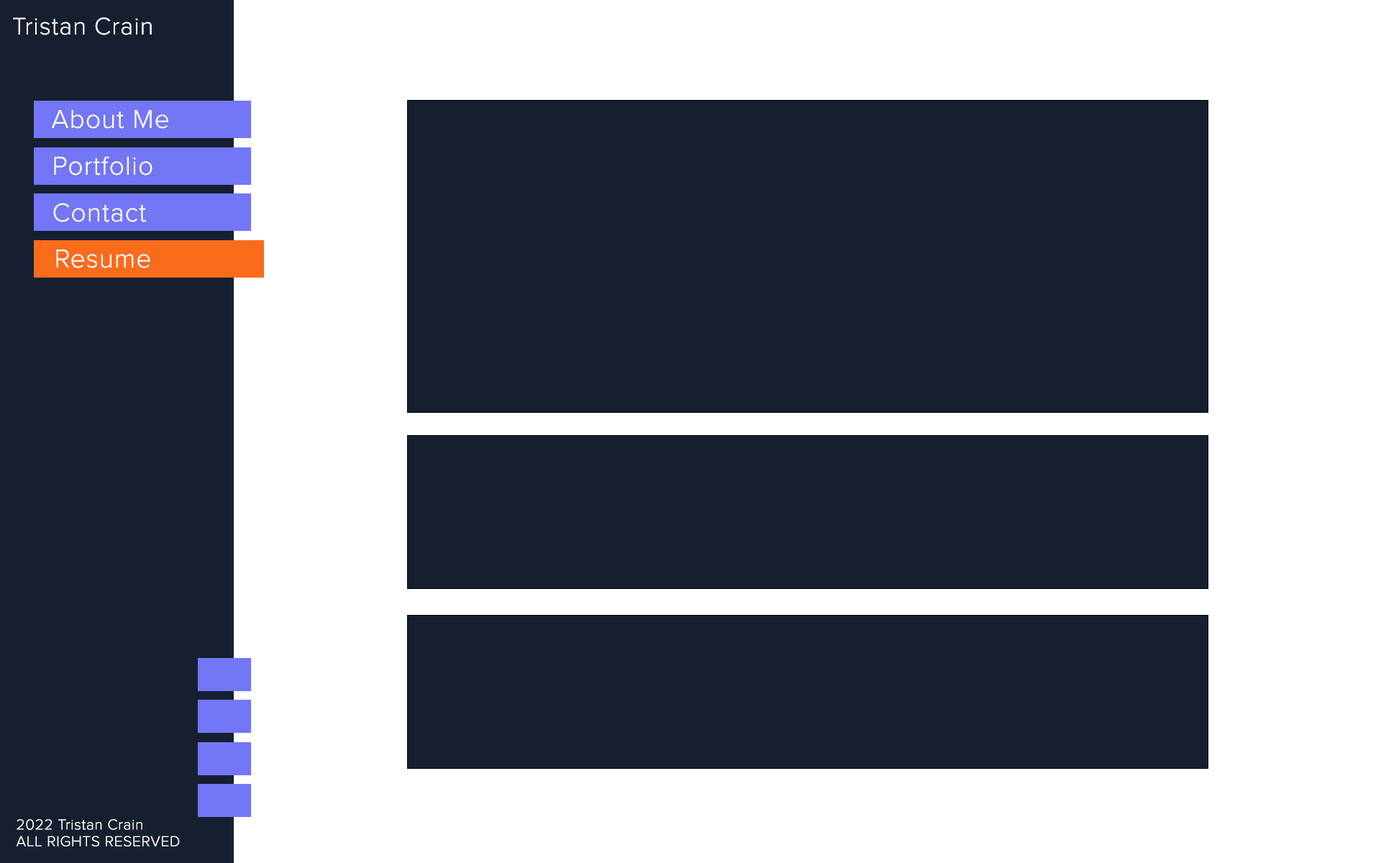
<style>
.page{position:relative;width:1381px;height:863px;background:#161f30}
.page>*{position:absolute;margin:0}
.t1{font:24.9px "ProximaNova-Light";letter-spacing:0.03em;color:#ffffff}
.t2{font:26.7px "ProximaNova-Light";letter-spacing:0.03em;color:#ffffff}
.t3{font:15.1px/16.7px "ProximaNova-Light";letter-spacing:0.03em;color:#ffffff}
</style>
<div class="page">
<p class="t1" style="left:13px;top:17px;width:139px;height:18px">Tristan Crain</p>
<p class="t2" style="left:52px;top:110px;width:116px;height:19px">About Me</p>
<p class="t2" style="left:54px;top:156px;width:99px;height:20px">Portfolio</p>
<p class="t2" style="left:53px;top:203px;width:94px;height:19px">Contact</p>
<p class="t2" style="left:56px;top:250px;width:94px;height:18px">Resume</p>
<p class="t3" style="left:16px;top:819px;width:164px;height:28px">2022 Tristan Crain<br>ALL RIGHTS RESERVED</p>
</div>
